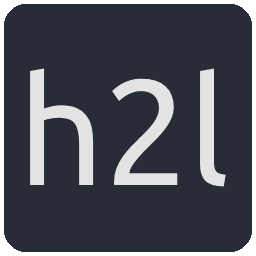
<style>
.page{position:relative;width:256px;height:256px;background:#282c37}
.page>*{position:absolute;margin:0}
.t1{font:150px "Ubuntu-Regular";color:#e3e3e3}
</style>
<div class="page">
<p class="t1" style="left:30px;top:68px;width:196px;height:119px">h2l</p>
</div>
